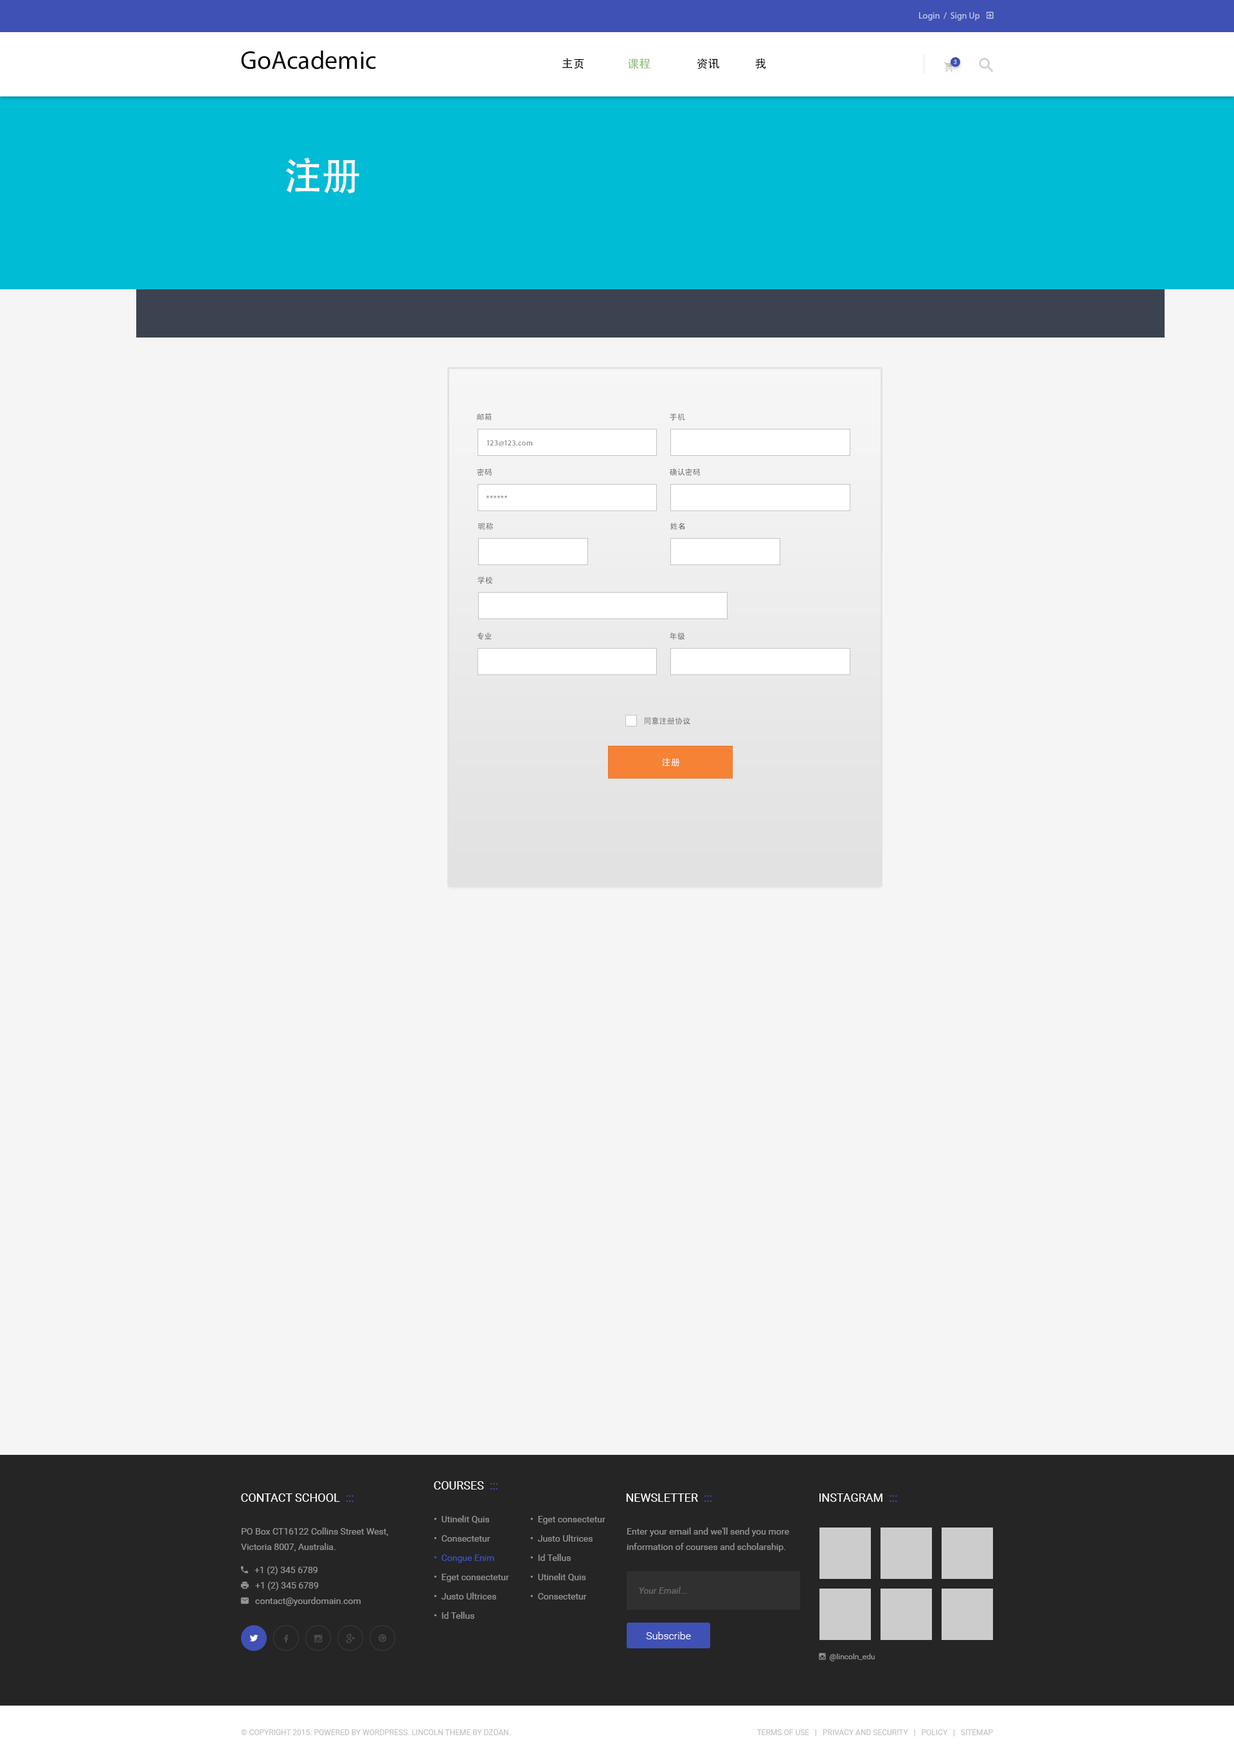
<style>
.page{position:relative;width:1234px;height:1757px;background:#f5f5f5}
.page>*{position:absolute;margin:0}
.t1{font:25.7px "MyriadPro-Regular";color:#000000}
.t2{font:11.6px "AdobeHeitiStd-Regular";color:#000000}
.t3{font:11.6px "AdobeHeitiStd-Regular";color:#87b672}
.t4{font:5.8px "Roboto-Regular";text-transform:uppercase}
.t5{font:38.6px "AdobeHeitiStd-Regular";color:#ffffff}
.t6{font:7.7px "AdobeHeitiStd-Regular";letter-spacing:0.05em;text-transform:uppercase}
.t7{font:7.7px "AdobeHeitiStd-Regular";letter-spacing:0.05em;color:#606060;text-transform:uppercase}
.t8{font:7.7px "MyriadPro-Regular";letter-spacing:0.05em;color:#606060}
.t9{font:7.7px "MyriadPro-Regular";letter-spacing:0.05em}
.t10{font:7.7px "AdobeHeitiStd-Regular";letter-spacing:0.05em;color:#606060}
.t11{font:9px "AdobeHeitiStd-Regular";letter-spacing:0.05em;color:#ffffff;text-transform:uppercase}
.t12{font:11.6px "Roboto-Regular";color:#ffffff;text-transform:uppercase}
.t13{font:11.6px "Roboto-Regular";color:#3f51b5;text-transform:uppercase}
.t14{font:9px/19.3px "Roboto-Regular";color:#959595}
.t15{font:9px/19.3px "Roboto-Regular";color:#3f51b5}
.t16{font:9px/15.4px "Roboto-Regular";color:#959595}
.t17{font:9px "Roboto-Italic";color:#6c6c6c}
.t18{font:10.3px "Roboto-Light";color:#ffffff}
.t19{font:7.7px "Roboto-Regular";color:#c2c2c2;text-transform:uppercase}
</style>
<div class="page">
<p class="t1" style="left:241px;top:50px;width:135px;height:19px">GoAcademic</p>
<p class="t2" style="left:563px;top:58px;width:21px;height:11px">主页</p>
<p class="t3" style="left:628px;top:59px;width:23px;height:10px">课程</p>
<p class="t2" style="left:697px;top:58px;width:23px;height:11px">资讯</p>
<p class="t2" style="left:755px;top:58px;width:11px;height:11px">我</p>
<p class="t4" style="left:954px;top:60px;width:3px;height:4px">3</p>
<p class="t5" style="left:286px;top:158px;width:73px;height:36px">注册</p>
<p class="t6" style="left:477px;top:413px;width:15px;height:7px">邮箱</p>
<p class="t7" style="left:670px;top:413px;width:15px;height:7px">手机</p>
<p class="t8" style="left:487px;top:440px;width:45px;height:7px">123@123.com</p>
<p class="t7" style="left:477px;top:469px;width:15px;height:7px">密码</p>
<p class="t7" style="left:670px;top:468px;width:30px;height:8px">确认密码</p>
<p class="t9" style="left:486px;top:495px;width:22px;height:3px">******</p>
<p class="t7" style="left:478px;top:523px;width:16px;height:7px">昵称</p>
<p class="t7" style="left:671px;top:523px;width:14px;height:7px">姓名</p>
<p class="t7" style="left:478px;top:577px;width:14px;height:7px">学校</p>
<p class="t7" style="left:477px;top:633px;width:15px;height:7px">专业</p>
<p class="t7" style="left:670px;top:633px;width:15px;height:7px">年级</p>
<p class="t10" style="left:645px;top:717px;width:45px;height:8px">同意注册协议</p>
<p class="t11" style="left:662px;top:758px;width:18px;height:8px">注册</p>
<p class="t12" style="left:434px;top:1481px;width:64px;height:9px">Courses  <span class="t13">:::</span></p>
<p class="t12" style="left:241px;top:1493px;width:113px;height:9px">Contact School  <span class="t13">:::</span></p>
<p class="t12" style="left:626px;top:1493px;width:86px;height:9px">Newsletter  <span class="t13">:::</span></p>
<p class="t12" style="left:820px;top:1493px;width:77px;height:9px">Instagram  <span class="t13">:::</span></p>
<p class="t14" style="left:434px;top:1515px;width:75px;height:104px">•  Utinelit Quis<br>•  Consectetur<br><span class="t15">•  Congue Enim<br></span>•  Eget consectetur<br>•  Justo Ultrices<br>•  Id Tellus</p>
<p class="t14" style="left:530px;top:1516px;width:76px;height:83px">•  Eget consectetur<br>•  Justo Ultrices<br>•  Id Tellus<br>•  Utinelit Quis<br>•  Consectetur</p>
<p class="t16" style="left:627px;top:1527px;width:162px;height:25px">Enter your email and we'll send you more information of courses and scholarship.</p>
<p class="t17" style="left:639px;top:1587px;width:48px;height:7px">Your Email...</p>
<p class="t18" style="left:646px;top:1632px;width:45px;height:7px">Subscribe</p>
<p class="t19" style="left:241px;top:1729px;width:270px;height:6px">© Copyright 2015. Powered by WordPress. Lincoln Theme by DZOAN.</p>
<p class="t19" style="left:757px;top:1729px;width:236px;height:7px">Terms of Use   |   Privacy and Security   |   Policy   |   Sitemap</p>
</div>
